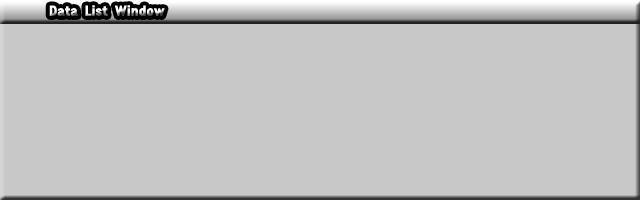
<style>
.page{position:relative;width:640px;height:200px;background:#c8c8c8}
.page>*{position:absolute;margin:0}
.t1{font:14px "GothicXB-HM"}
</style>
<div class="page">
<p class="t1" style="left:49px;top:5px;width:116px;height:11px">Data List Window</p>
</div>
